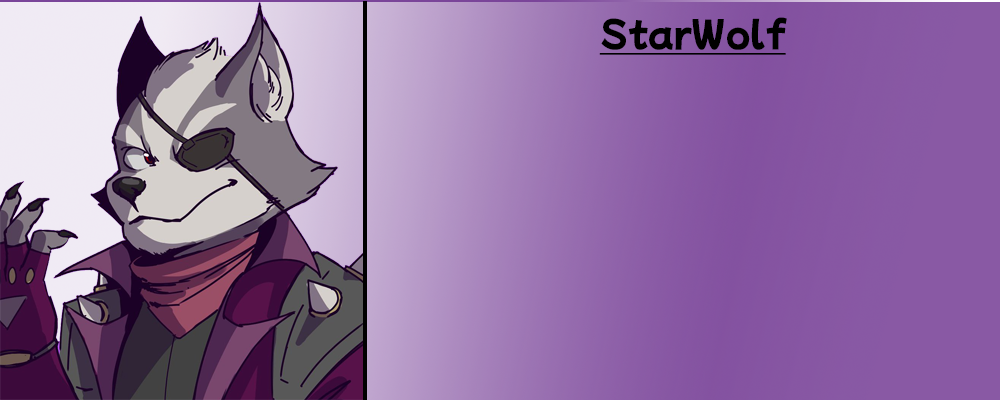
<style>
.page{position:relative;width:1000px;height:400px}
.page>*{position:absolute;margin:0}
.t1{font:35.1px "MochiyPopOne-Regular";color:#000000;text-decoration:underline}
</style>
<div class="page">
<p class="t1" style="left:599px;top:17px;width:188px;height:38px">StarWolf</p>
</div>
